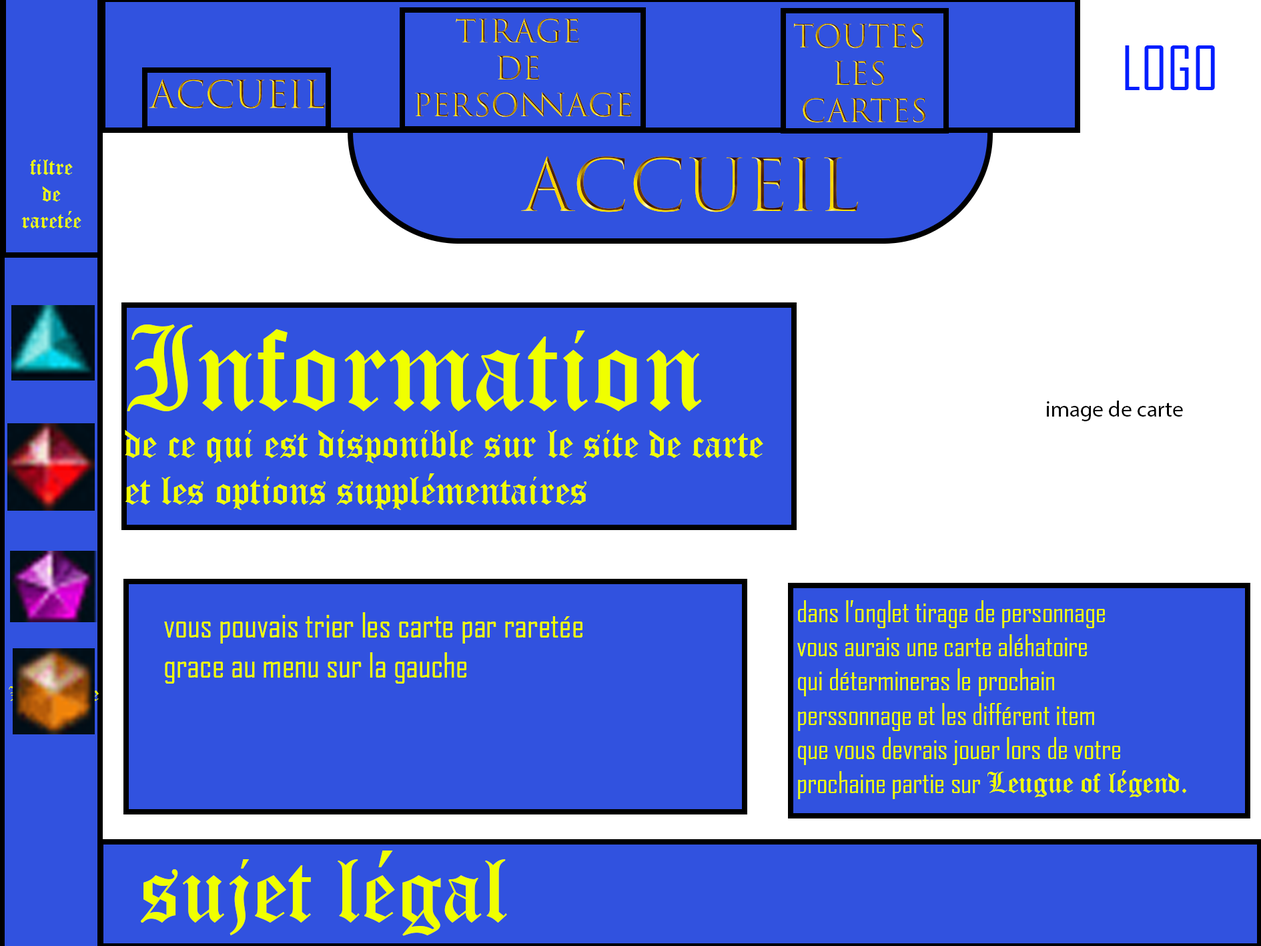
<style>
.page{position:relative;width:1261px;height:946px;background:#3152df}
.page>*{position:absolute;margin:0}
.t1{font:30.8px "TrajanColor-Concept"}
.t2{font:31px "TrajanColor-Concept"}
.t3{font:58.6px "AgencyFB-Reg";color:#001eff}
.t4{font:36.8px "TrajanColor-Concept"}
.t5{font:22.2px "OldEnglishTextMT";color:#f0ff00}
.t6{font:70.5px "TrajanColor-Concept"}
.t7{font:39.1px "OldEnglishTextMT";color:#f0ff00}
.t8{font:117.2px "OldEnglishTextMT";color:#f0ff00}
.t9{font:22.2px "MyriadPro-Regular";color:#000000}
.t10{font:28.4px "AgencyFB-Reg";color:#f0ff00}
.t11{font:28.4px "OldEnglishTextMT";color:#f0ff00}
.t12{font:33.4px "AgencyFB-Reg";color:#f0ff00}
.t13{font:90.2px "OldEnglishTextMT";color:#f0ff00}
</style>
<div class="page">
<p class="t1" style="left:415px;top:18px;width:217px;height:99px;text-align:center">tirage <br>de <br>personnage</p>
<p class="t2" style="left:793px;top:23px;width:133px;height:100px;text-align:center">toutes <br>les <br>cartes</p>
<p class="t3" style="left:1125px;top:45px;width:90px;height:45px">LOGO</p>
<p class="t4" style="left:149px;top:79px;width:176px;height:30px">Accueil</p>
<p class="t5" style="left:21px;top:159px;width:60px;height:69px;text-align:center">filtre<br>de<br>raretée</p>
<p class="t6" style="left:521px;top:156px;width:337px;height:56px">ACCUEIL</p>
<p class="t7" style="left:125px;top:324px;width:638px;height:186px"><span class="t8">Information <br></span>de ce qui est disponible sur le site de carte <br>et les options supplémentaires</p>
<p class="t9" style="left:1047px;top:400px;width:136px;height:21px">image de carte</p>
<p class="t10" style="left:797px;top:600px;width:389px;height:199px">dans l’onglet tirage de personnage<br>vous aurais une carte aléhatoire <br>qui détermineras le prochain <br>perssonnage et les différent item<br>que vous devrais jouer lors de votre<br>prochaine partie sur <span class="t11">Leugue of légend.</span></p>
<p class="t12" style="left:164px;top:612px;width:419px;height:71px">vous pouvais trier les carte par raretée<br>grace au menu sur la gauche</p>
<p class="t13" style="left:141px;top:850px;width:366px;height:86px">sujet légal</p>
</div>
